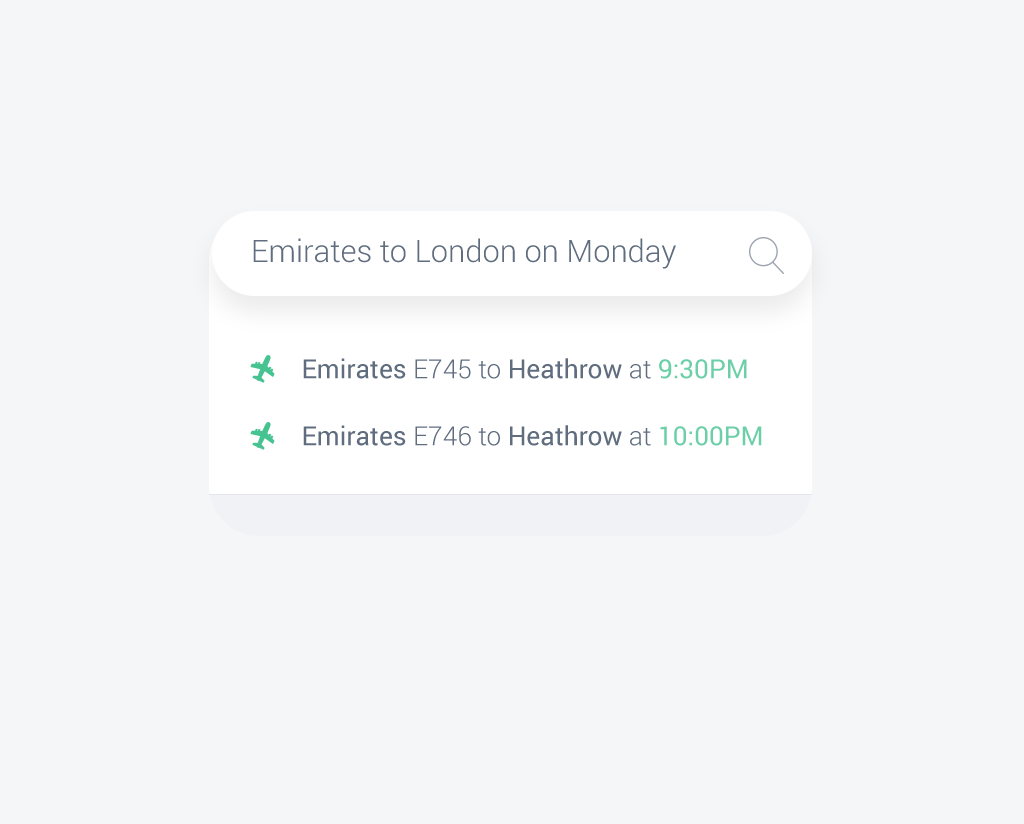
<style>
.page{position:relative;width:1024px;height:824px;background:#f5f6f8}
.page>*{position:absolute;margin:0}
.t1{font:30.9px "Roboto-Light";color:#5f6d7f}
.t2{font:26.3px "Roboto-Regular";color:#5f6d7f}
.t3{font:26.3px "Roboto-Light";color:#5f6d7f}
</style>
<div class="page">
<p class="t1" style="left:253px;top:238px;width:423px;height:31px">Emirates to London on Monday</p>
<p class="t2" style="left:303px;top:358px;width:444px;height:21px">Emirates<span class="t3"> E745 to </span>Heathrow<span class="t3"> at </span>9:30PM</p>
<p class="t2" style="left:303px;top:425px;width:459px;height:21px">Emirates<span class="t3"> E746 to </span>Heathrow<span class="t3"> at </span>10:00PM</p>
</div>
